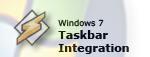
<style>
.page{position:relative;width:150px;height:57px}
.page>*{position:absolute;margin:0}
.t1{font:11.1px "Verdana-Bold";color:#000000}
.t2{font:8.3px "Verdana"}
</style>
<div class="page">
<p class="t1" style="left:58px;top:30px;width:71px;height:24px;text-align:justify">Taskbar<br>Integration</p>
<p class="t2" style="left:58px;top:19px;width:46px;height:8px">Windows 7</p>
</div>
